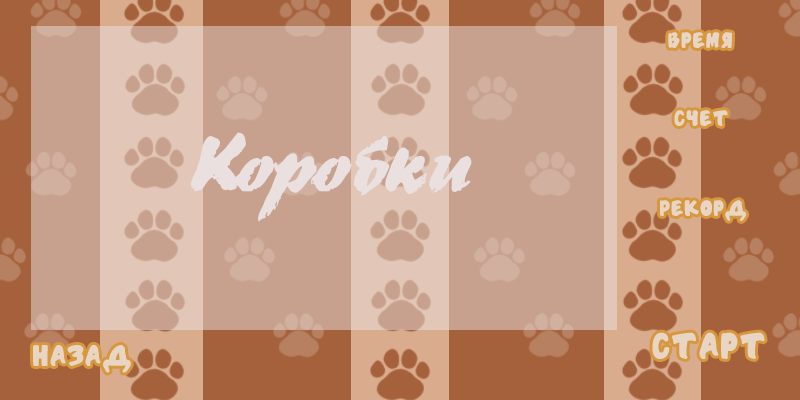
<style>
.page{position:relative;width:800px;height:400px;background:#c8a18e}
.page>*{position:absolute;margin:0}
.t1{font:18px "HandSound";color:#e9d5c4}
.t2{font:48px "DSBroadBrush";color:#eae0e0}
.t3{font:30px "HandSound";color:#e9d5c4}
.t4{font:24px "HandSound";color:#e9d5c4}
</style>
<div class="page">
<p class="t1" style="left:668px;top:32px;width:64px;height:16px">Время</p>
<p class="t1" style="left:674px;top:110px;width:54px;height:16px">Счет</p>
<p class="t2" style="left:191px;top:132px;width:281px;height:90px;text-align:center">Коробки</p>
<p class="t1" style="left:660px;top:200px;width:87px;height:21px">Рекорд</p>
<p class="t3" style="left:652px;top:332px;width:113px;height:27px">Старт</p>
<p class="t4" style="left:33px;top:345px;width:98px;height:28px">Назад</p>
</div>
